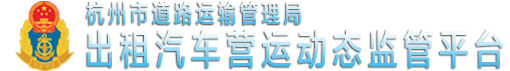
<style>
.page{position:relative;width:510px;height:71px;background:#ffffff}
.page>*{position:absolute;margin:0}
.t1{font:25.2px "FZLTZHUNHK--GBK1-0";letter-spacing:0.2em;scale:0.73 1}
.t2{font:40.9px "FZLTZHUNHK--GBK1-0";letter-spacing:0.2em;scale:0.72 1}
</style>
<div class="page">
<p class="t1" style="left:86px;top:0px;width:216px;height:25px">杭州市道路运输管理局</p>
<p class="t2" style="left:87px;top:29px;width:417px;height:39px">出租汽车营运动态监管平台</p>
</div>
